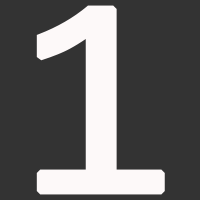
<style>
.page{position:relative;width:200px;height:200px;background:#333333}
.page>*{position:absolute;margin:0}
.t1{font:240px "Monaco";letter-spacing:0.025em;color:#fdf9f9;font-weight:bold;scale:1.1 1}
</style>
<div class="page">
<p class="t1" style="left:36px;top:5px;width:129px;height:190px">1</p>
</div>
